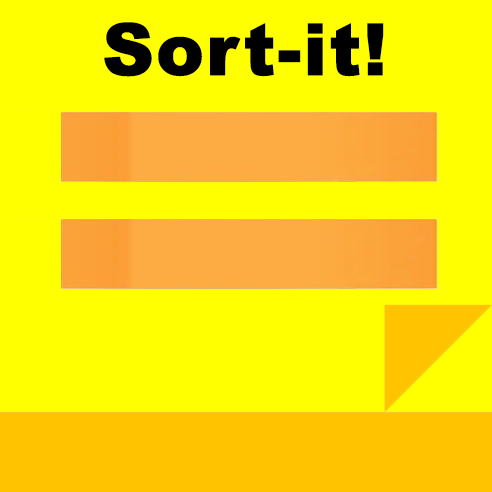
<style>
.page{position:relative;width:492px;height:492px;background:#ffff00}
.page>*{position:absolute;margin:0}
.t1{font:72px "Arial-Black";color:#000000;font-weight:bold}
</style>
<div class="page">
<p class="t1" style="left:104px;top:22px;width:280px;height:55px">Sort-it!</p>
</div>
